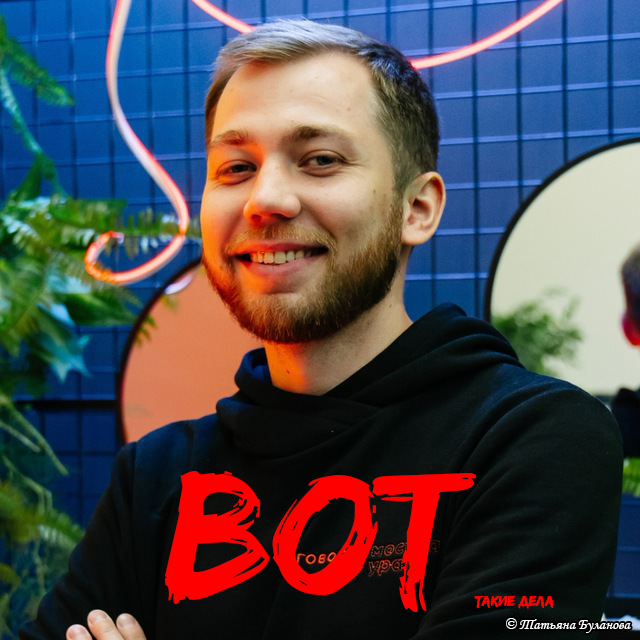
<style>
.page{position:relative;width:640px;height:640px}
.page>*{position:absolute;margin:0}
.t1{font:180px "EdoSZHQ-Regular";color:#ff0000}
.t2{font:15px "EdoSZHQ-Regular";color:#ff0000}
.t3{font:15px "MonotypeCorsiva";color:#ffffff}
</style>
<div class="page">
<p class="t1" style="left:164px;top:471px;width:312px;height:141px">BOT</p>
<p class="t2" style="left:474px;top:596px;width:80px;height:13px">такие дела</p>
<p class="t3" style="left:506px;top:618px;width:125px;height:15px">© Татьяна Буланова</p>
</div>
